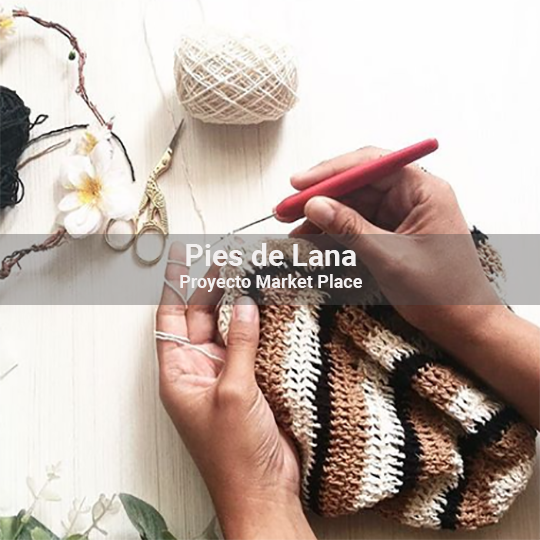
<style>
.page{position:relative;width:540px;height:540px}
.page>*{position:absolute;margin:0}
.t1{font:18px "Roboto-Bold";color:#f2efef}
.t2{font:30px "Roboto-Bold";color:#f2efef}
</style>
<div class="page">
<p class="t1" style="left:180px;top:243px;width:182px;height:49px;text-align:center"><span class="t2">Pies de Lana<br></span>Proyecto Market Place</p>
</div>
